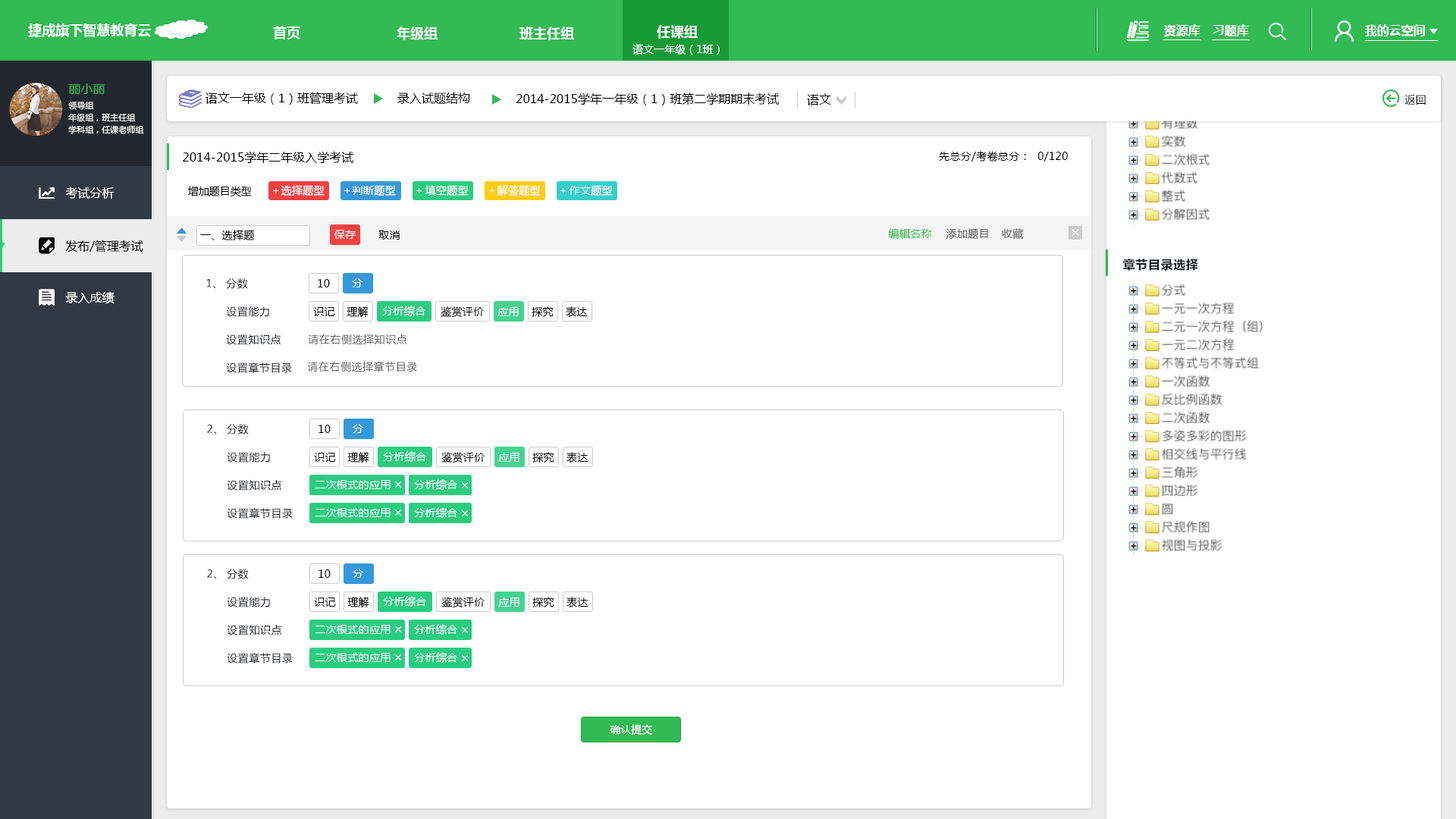
<style>
.page{position:relative;width:1456px;height:819px;background:#ffffff}
.page>*{position:absolute;margin:0}
.t1{font:13.6px "MicrosoftYaHei-Bold";color:#ffffff}
.t2{font:12.1px "MicrosoftYaHei-Bold";color:#ffffff}
.t3{font:10.6px "MicrosoftYaHei";color:#ffffff}
.t4{font:12.1px "MicrosoftYaHei";color:#32ba54}
.t5{font:8.3px/12.1px "MicrosoftYaHei";color:#ffffff}
.t6{font:12.1px "MicrosoftYaHei";color:#000000}
.t7{font:10.6px "MicrosoftYaHei";letter-spacing:0.04em;color:#000000}
.t8{font:10.6px "MicrosoftYaHei";letter-spacing:0.025em;color:#000000}
.t9{font:10.6px "MicrosoftYaHei";color:#000000}
.t10{font:10.6px "MicrosoftYaHei";letter-spacing:0.025em;color:#ffffff}
.t11{font:12.1px "MicrosoftYaHei";color:#ffffff}
.t12{font:10.6px "MicrosoftYaHei";letter-spacing:0.025em;color:#32ba54}
.t13{font:10.6px "MicrosoftYaHei";letter-spacing:0.025em;color:#606060}
.t14{font:15.2px "MicrosoftYaHei";letter-spacing:0.025em;color:#ffffff}
.t15{font:12.1px "MicrosoftYaHei-Bold";letter-spacing:0.04em;color:#171a21}
.t16{font:10.6px "MicrosoftYaHei";letter-spacing:0.04em;color:#171a21}
.t17{font:10.6px "MicrosoftYaHei";letter-spacing:0.04em;color:#606060}
.t18{font:13.6px "MicrosoftYaHei";letter-spacing:0.04em;color:#ffffff}
.t19{font:10.6px "MicrosoftYaHei";color:#fffefe}
</style>
<div class="page">
<p class="t1" style="left:28px;top:24px;width:123px;height:13px">捷成旗下智慧教育云</p>
<p class="t1" style="left:273px;top:26px;width:27px;height:13px">首页</p>
<p class="t1" style="left:397px;top:27px;width:41px;height:13px">年级组</p>
<p class="t1" style="left:519px;top:27px;width:55px;height:13px">班主任组</p>
<p class="t1" style="left:657px;top:25px;width:41px;height:14px">任课组</p>
<p class="t2" style="left:1164px;top:24px;width:36px;height:13px">资源库</p>
<p class="t2" style="left:1213px;top:24px;width:36px;height:13px">习题库</p>
<p class="t2" style="left:1365px;top:24px;width:60px;height:12px">我的云空间</p>
<p class="t3" style="left:632px;top:44px;width:88px;height:11px">语文一年级（1班）</p>
<p class="t4" style="left:68px;top:83px;width:37px;height:11px">丽小丽</p>
<p class="t5" style="left:68px;top:102px;width:76px;height:32px">领导组<br>年级组，班主任组<br>学科组，任课老师组</p>
<p class="t6" style="left:206px;top:92px;width:152px;height:13px">语文一年级（1）班管理考试</p>
<p class="t6" style="left:397px;top:92px;width:73px;height:12px">录入试题结构</p>
<p class="t6" style="left:516px;top:93px;width:263px;height:12px">2014-2015学年一年级（1）班第二学期期末考试</p>
<p class="t6" style="left:807px;top:93px;width:24px;height:12px">语文</p>
<p class="t7" style="left:1404px;top:94px;width:22px;height:11px">返回</p>
<p class="t6" style="left:183px;top:151px;width:170px;height:13px">2014-2015学年二年级入学考试</p>
<p class="t8" style="left:939px;top:151px;width:129px;height:11px">先总分/考卷总分：  0/120</p>
<p class="t9" style="left:187px;top:186px;width:65px;height:11px">增加题目类型</p>
<p class="t10" style="left:281px;top:185px;width:44px;height:11px">选择题型</p>
<p class="t10" style="left:352px;top:185px;width:44px;height:11px">判断题型</p>
<p class="t10" style="left:425px;top:185px;width:44px;height:11px">填空题型</p>
<p class="t10" style="left:497px;top:185px;width:44px;height:11px">解答题型</p>
<p class="t10" style="left:569px;top:185px;width:44px;height:11px">作文题型</p>
<p class="t11" style="left:65px;top:187px;width:50px;height:12px">考试分析</p>
<p class="t11" style="left:65px;top:187px;width:50px;height:12px">考试分析</p>
<p class="t10" style="left:273px;top:188px;width:6px;height:5px">＋</p>
<p class="t10" style="left:344px;top:188px;width:6px;height:5px">＋</p>
<p class="t10" style="left:416px;top:188px;width:6px;height:5px">＋</p>
<p class="t10" style="left:489px;top:188px;width:6px;height:5px">＋</p>
<p class="t10" style="left:560px;top:188px;width:6px;height:5px">＋</p>
<p class="t8" style="left:200px;top:230px;width:54px;height:10px">一、选择题</p>
<p class="t10" style="left:334px;top:230px;width:22px;height:9px">保存</p>
<p class="t8" style="left:378px;top:231px;width:22px;height:9px">取消</p>
<p class="t12" style="left:888px;top:228px;width:44px;height:11px">编辑名称</p>
<p class="t13" style="left:946px;top:228px;width:42px;height:11px">添加题目</p>
<p class="t13" style="left:1002px;top:228px;width:22px;height:12px">收藏</p>
<p class="t14" style="left:1072px;top:229px;width:7px;height:7px">×</p>
<p class="t6" style="left:65px;top:240px;width:78px;height:13px">发布/管理考试</p>
<p class="t15" style="left:1123px;top:259px;width:75px;height:12px">章节目录选择</p>
<p class="t16" style="left:206px;top:278px;width:10px;height:11px">1、</p>
<p class="t16" style="left:226px;top:278px;width:22px;height:11px">分数</p>
<p class="t8" style="left:318px;top:279px;width:12px;height:8px">10</p>
<p class="t10" style="left:352px;top:278px;width:11px;height:9px">分</p>
<p class="t11" style="left:65px;top:291px;width:50px;height:13px">录入成绩</p>
<p class="t11" style="left:65px;top:291px;width:50px;height:13px">录入成绩</p>
<p class="t10" style="left:382px;top:306px;width:43px;height:10px">分析综合</p>
<p class="t16" style="left:226px;top:306px;width:43px;height:11px">设置能力</p>
<p class="t8" style="left:313px;top:307px;width:22px;height:9px">识记</p>
<p class="t8" style="left:347px;top:306px;width:22px;height:12px">理解</p>
<p class="t8" style="left:441px;top:306px;width:43px;height:12px">鉴赏评价</p>
<p class="t10" style="left:497px;top:307px;width:22px;height:9px">应用</p>
<p class="t8" style="left:532px;top:306px;width:22px;height:11px">探究</p>
<p class="t8" style="left:566px;top:306px;width:22px;height:12px">表达</p>
<p class="t16" style="left:226px;top:334px;width:55px;height:11px">设置知识点</p>
<p class="t17" style="left:308px;top:334px;width:99px;height:11px">请在右侧选择知识点</p>
<p class="t16" style="left:226px;top:362px;width:66px;height:11px">设置章节目录</p>
<p class="t17" style="left:307px;top:361px;width:110px;height:11px">请在右侧选择章节目录</p>
<p class="t16" style="left:207px;top:424px;width:10px;height:11px">2、</p>
<p class="t16" style="left:227px;top:424px;width:22px;height:11px">分数</p>
<p class="t8" style="left:318px;top:425px;width:13px;height:8px">10</p>
<p class="t10" style="left:353px;top:424px;width:11px;height:9px">分</p>
<p class="t16" style="left:227px;top:452px;width:43px;height:11px">设置能力</p>
<p class="t8" style="left:314px;top:453px;width:22px;height:9px">识记</p>
<p class="t8" style="left:347px;top:452px;width:22px;height:11px">理解</p>
<p class="t10" style="left:383px;top:451px;width:43px;height:11px">分析综合</p>
<p class="t8" style="left:441px;top:452px;width:44px;height:11px">鉴赏评价</p>
<p class="t10" style="left:498px;top:453px;width:21px;height:9px">应用</p>
<p class="t8" style="left:532px;top:452px;width:22px;height:11px">探究</p>
<p class="t8" style="left:566px;top:452px;width:22px;height:11px">表达</p>
<p class="t16" style="left:227px;top:480px;width:54px;height:11px">设置知识点</p>
<p class="t10" style="left:315px;top:480px;width:76px;height:9px">二次根式的应用</p>
<p class="t18" style="left:395px;top:481px;width:7px;height:7px">×</p>
<p class="t10" style="left:414px;top:479px;width:43px;height:11px">分析综合</p>
<p class="t18" style="left:462px;top:482px;width:7px;height:6px">×</p>
<p class="t16" style="left:227px;top:508px;width:66px;height:11px">设置章节目录</p>
<p class="t10" style="left:315px;top:508px;width:76px;height:9px">二次根式的应用</p>
<p class="t18" style="left:395px;top:509px;width:7px;height:7px">×</p>
<p class="t10" style="left:414px;top:507px;width:43px;height:11px">分析综合</p>
<p class="t18" style="left:462px;top:510px;width:7px;height:6px">×</p>
<p class="t16" style="left:207px;top:569px;width:10px;height:10px">2、</p>
<p class="t16" style="left:227px;top:569px;width:22px;height:10px">分数</p>
<p class="t8" style="left:318px;top:570px;width:13px;height:8px">10</p>
<p class="t10" style="left:353px;top:569px;width:11px;height:9px">分</p>
<p class="t16" style="left:227px;top:597px;width:43px;height:10px">设置能力</p>
<p class="t8" style="left:314px;top:598px;width:22px;height:9px">识记</p>
<p class="t8" style="left:347px;top:597px;width:22px;height:11px">理解</p>
<p class="t10" style="left:383px;top:596px;width:43px;height:11px">分析综合</p>
<p class="t8" style="left:441px;top:597px;width:44px;height:11px">鉴赏评价</p>
<p class="t10" style="left:498px;top:598px;width:21px;height:9px">应用</p>
<p class="t8" style="left:532px;top:597px;width:22px;height:10px">探究</p>
<p class="t8" style="left:566px;top:597px;width:22px;height:11px">表达</p>
<p class="t16" style="left:227px;top:625px;width:54px;height:10px">设置知识点</p>
<p class="t10" style="left:315px;top:625px;width:76px;height:9px">二次根式的应用</p>
<p class="t18" style="left:395px;top:626px;width:7px;height:6px">×</p>
<p class="t10" style="left:414px;top:624px;width:43px;height:11px">分析综合</p>
<p class="t18" style="left:462px;top:626px;width:7px;height:7px">×</p>
<p class="t16" style="left:227px;top:653px;width:66px;height:11px">设置章节目录</p>
<p class="t10" style="left:315px;top:653px;width:76px;height:9px">二次根式的应用</p>
<p class="t18" style="left:395px;top:654px;width:7px;height:6px">×</p>
<p class="t10" style="left:414px;top:652px;width:43px;height:11px">分析综合</p>
<p class="t18" style="left:462px;top:654px;width:7px;height:7px">×</p>
<p class="t19" style="left:610px;top:724px;width:42px;height:11px">确认提交</p>
</div>
